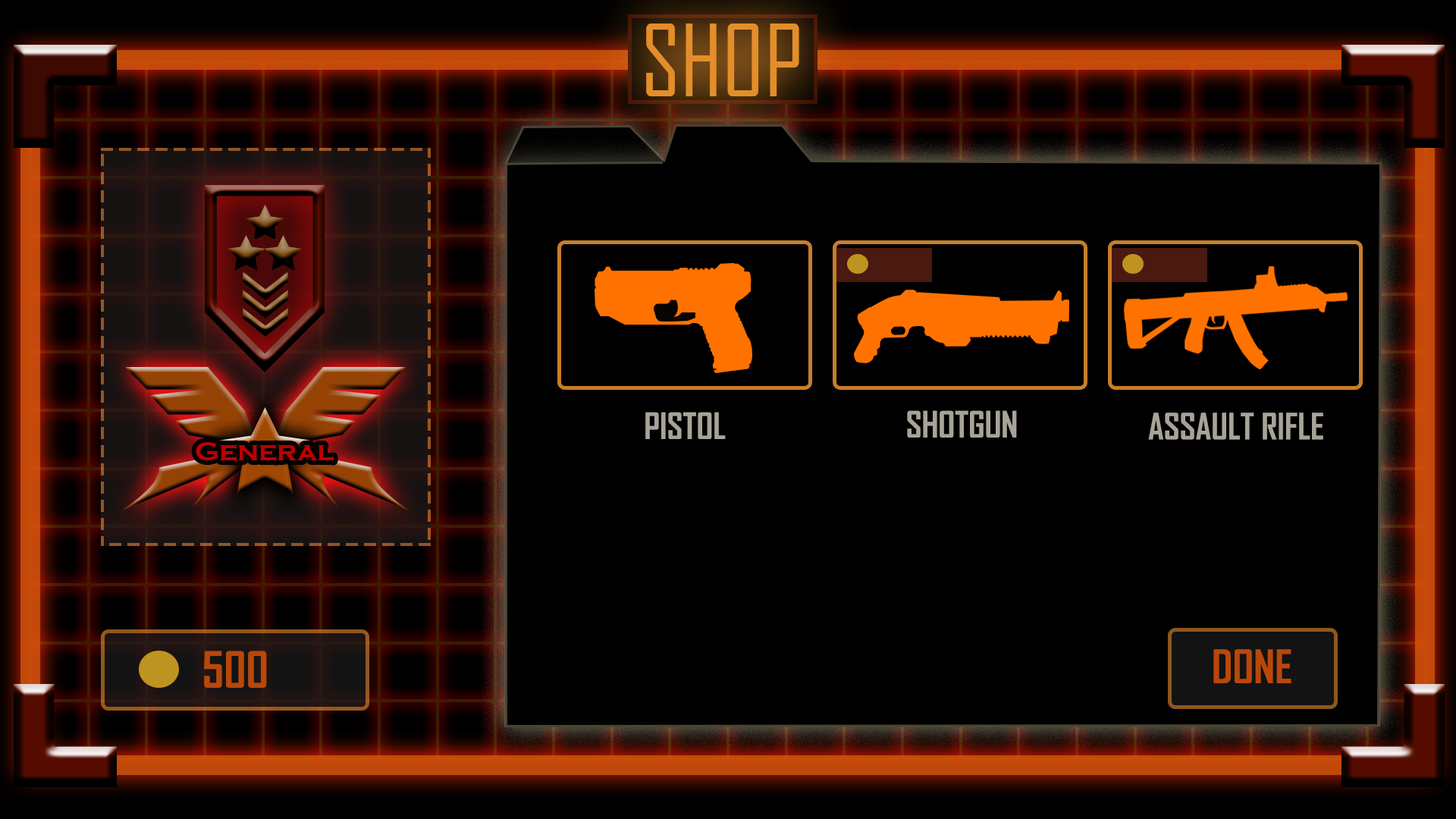
<style>
.page{position:relative;width:1456px;height:819px;background:#000000}
.page>*{position:absolute;margin:0}
.t1{font:94.8px "AgencyFB-Reg";color:#e38e2a}
.t2{font:34.8px "AgencyFB-Bold";color:#a7a398}
.t3{font:28.4px "CopperplateGothic-Bold";color:#bb0000}
.t4{font:47.7px "AgencyFB-Bold";color:#b84809}
.t5{font:44.2px "AgencyFB-Bold";color:#b84809}
</style>
<div class="page">
<p class="t1" style="left:646px;top:24px;width:153px;height:72px">SHOP</p>
<p class="t2" style="left:645px;top:412px;width:81px;height:27px">PISTOL</p>
<p class="t2" style="left:907px;top:410px;width:110px;height:28px">SHOTGUN</p>
<p class="t2" style="left:1148px;top:413px;width:175px;height:27px">ASSAULT RIFLE</p>
<p class="t3" style="left:196px;top:442px;width:138px;height:19px">General</p>
<p class="t4" style="left:204px;top:651px;width:63px;height:37px">500</p>
<p class="t5" style="left:1213px;top:649px;width:78px;height:34px">DONE</p>
</div>
